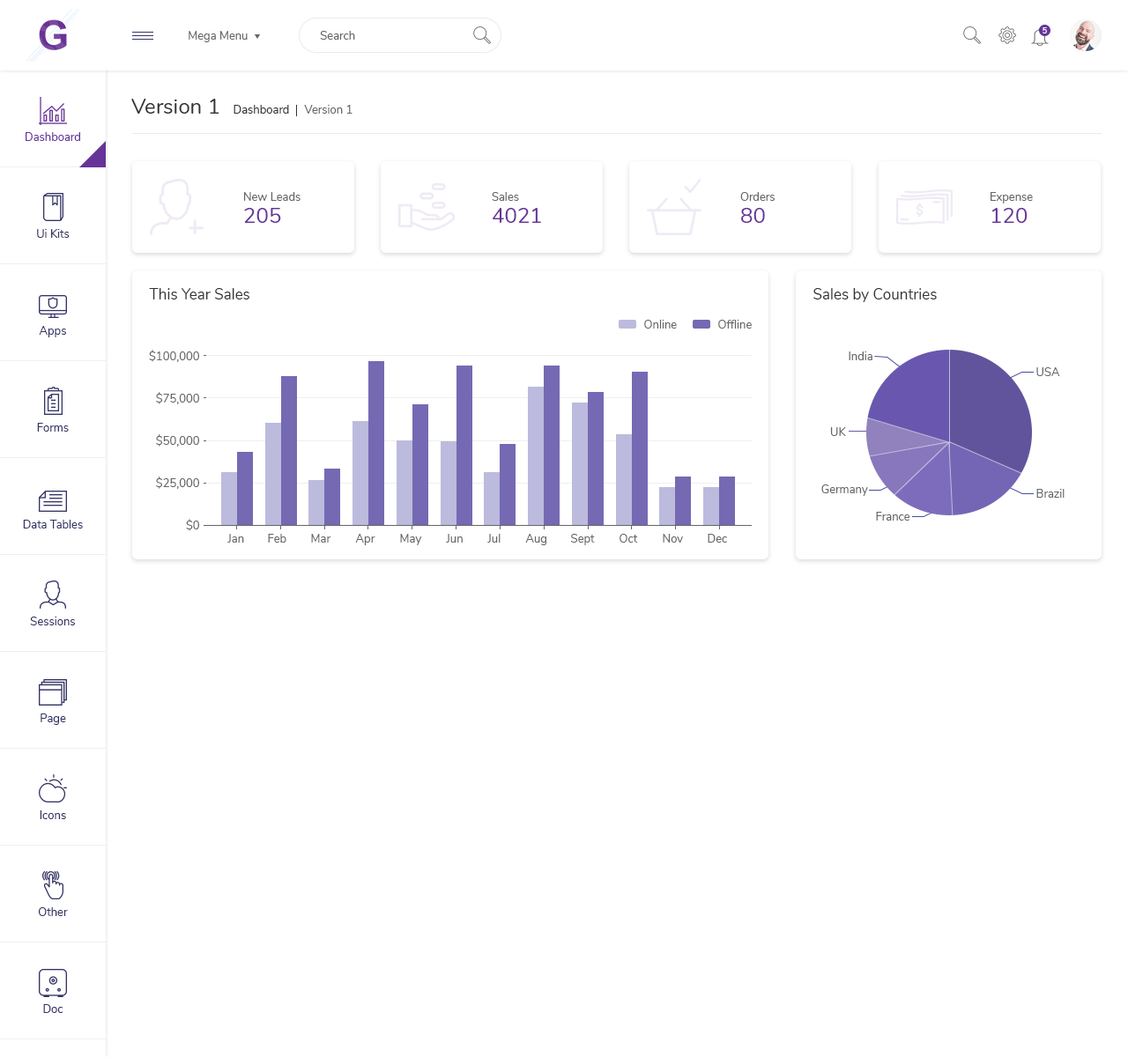
<style>
.page{position:relative;width:1128px;height:1057px;background:#ffffff}
.page>*{position:absolute;margin:0}
.t1{font:7.9px "Nunito-SemiBold";color:#ffffff}
.t2{font:11.5px "Nunito-Regular";color:#666666}
.t3{font:21.1px "Nunito-Regular";color:#333333}
.t4{font:11.5px "Nunito-Regular";color:#333333}
.t5{font:11.5px "Nunito-Regular";color:#663399}
.t6{font:21.1px "Nunito-Regular";color:#663399}
.t7{font:11.5px "Nunito-Regular";color:#333366}
.t8{font:15px "Nunito-Regular";color:#333333}
</style>
<div class="page">
<p class="t1" style="left:1042px;top:27px;width:5px;height:6px">5</p>
<p class="t2" style="left:189px;top:31px;width:59px;height:11px">Mega Menu</p>
<p class="t2" style="left:320px;top:31px;width:35px;height:9px">Search</p>
<p class="t3" style="left:131px;top:99px;width:88px;height:15px">Version 1</p>
<p class="t4" style="left:233px;top:105px;width:56px;height:9px">Dashboard</p>
<p class="t2" style="left:304px;top:105px;width:48px;height:9px">Version 1</p>
<p class="t5" style="left:26px;top:132px;width:54px;height:9px">Dashboard</p>
<p class="t2" style="left:244px;top:192px;width:56px;height:9px">New Leads</p>
<p class="t2" style="left:492px;top:192px;width:27px;height:9px">Sales</p>
<p class="t2" style="left:740px;top:192px;width:34px;height:9px">Orders</p>
<p class="t2" style="left:990px;top:192px;width:43px;height:12px">Expense</p>
<p class="t6" style="left:244px;top:208px;width:37px;height:15px">205</p>
<p class="t6" style="left:493px;top:208px;width:48px;height:15px">4021</p>
<p class="t6" style="left:741px;top:208px;width:24px;height:15px">80</p>
<p class="t6" style="left:992px;top:208px;width:35px;height:15px">120</p>
<p class="t7" style="left:37px;top:229px;width:33px;height:9px">Ui Kits</p>
<p class="t8" style="left:149px;top:288px;width:100px;height:12px">This Year Sales</p>
<p class="t8" style="left:813px;top:288px;width:124px;height:14px">Sales by Countries</p>
<p class="t7" style="left:39px;top:326px;width:27px;height:11px">Apps</p>
<p class="t2" style="left:644px;top:320px;width:33px;height:9px">Online</p>
<p class="t2" style="left:718px;top:320px;width:34px;height:9px">Offline</p>
<p class="t2" style="left:149px;top:350px;width:50px;height:12px">$100,000</p>
<p class="t2" style="left:848px;top:352px;width:24px;height:8px">India</p>
<p class="t2" style="left:1036px;top:367px;width:24px;height:9px">USA</p>
<p class="t2" style="left:156px;top:392px;width:43px;height:12px">$75,000</p>
<p class="t7" style="left:37px;top:423px;width:32px;height:9px">Forms</p>
<p class="t2" style="left:156px;top:434px;width:43px;height:13px">$50,000</p>
<p class="t2" style="left:830px;top:427px;width:16px;height:9px">UK</p>
<p class="t2" style="left:156px;top:477px;width:43px;height:12px">$25,000</p>
<p class="t2" style="left:821px;top:485px;width:47px;height:11px">Germany</p>
<p class="t2" style="left:1036px;top:489px;width:28px;height:9px">Brazil</p>
<p class="t7" style="left:23px;top:520px;width:60px;height:9px">Data Tables</p>
<p class="t2" style="left:186px;top:519px;width:13px;height:12px">$0</p>
<p class="t2" style="left:876px;top:512px;width:34px;height:9px">France</p>
<p class="t2" style="left:227px;top:534px;width:17px;height:9px">Jan</p>
<p class="t2" style="left:268px;top:534px;width:18px;height:9px">Feb</p>
<p class="t2" style="left:311px;top:534px;width:20px;height:9px">Mar</p>
<p class="t2" style="left:355px;top:534px;width:20px;height:11px">Apr</p>
<p class="t2" style="left:400px;top:534px;width:22px;height:11px">May</p>
<p class="t2" style="left:446px;top:534px;width:17px;height:9px">Jun</p>
<p class="t2" style="left:487px;top:534px;width:13px;height:9px">Jul</p>
<p class="t2" style="left:525px;top:534px;width:21px;height:11px">Aug</p>
<p class="t2" style="left:571px;top:534px;width:24px;height:11px">Sept</p>
<p class="t2" style="left:619px;top:534px;width:19px;height:9px">Oct</p>
<p class="t2" style="left:663px;top:534px;width:20px;height:9px">Nov</p>
<p class="t2" style="left:708px;top:534px;width:19px;height:9px">Dec</p>
<p class="t7" style="left:30px;top:617px;width:45px;height:9px">Sessions</p>
<p class="t7" style="left:41px;top:714px;width:25px;height:11px">Page</p>
<p class="t7" style="left:40px;top:811px;width:26px;height:8px">Icons</p>
<p class="t7" style="left:38px;top:908px;width:30px;height:8px">Other</p>
<p class="t7" style="left:43px;top:1004px;width:20px;height:9px">Doc</p>
</div>
